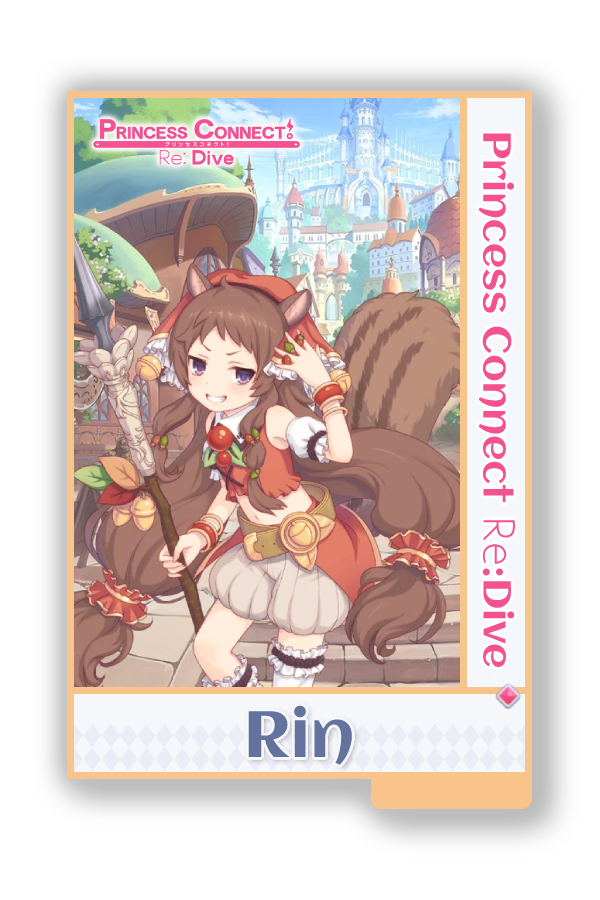
<style>
.page{position:relative;width:600px;height:900px;background:#ffffff}
.page>*{position:absolute;margin:0}
.t1{font:39px "Aclonica-Regular";color:#f55191}
.t2{font:39px "AaarghNormal";color:#f55191}
.t3{font:65px "Aclonica-Regular";color:#64739d}
</style>
<div class="page">
<p class="t1" style="left:478px;top:133px;width:38px;height:534px;rotate:90deg">Princess Connect <span class="t2">Re</span>:Dive</p>
<p class="t3" style="left:248px;top:705px;width:104px;height:60px">Rin</p>
</div>
